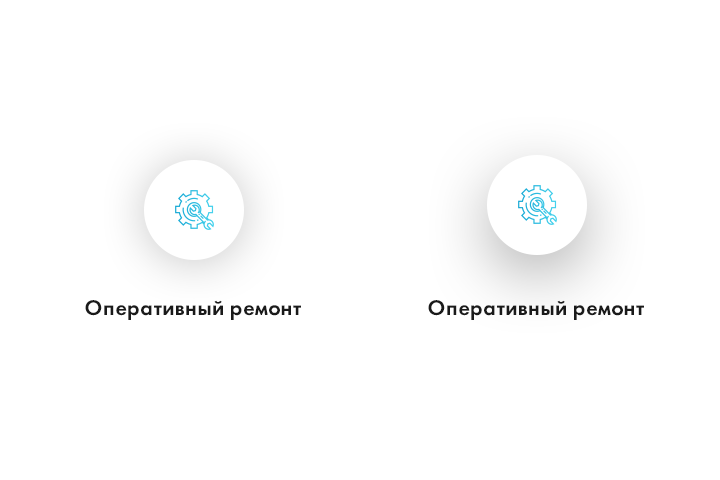
<style>
.page{position:relative;width:720px;height:480px;background:#ffffff}
.page>*{position:absolute;margin:0}
.t1{font:22px "FuturaPTDemi";letter-spacing:0.02em;color:#1a1a1a}
</style>
<div class="page">
<p class="t1" style="left:85px;top:300px;width:216px;height:20px">Оперативный ремонт</p>
<p class="t1" style="left:428px;top:300px;width:216px;height:20px">Оперативный ремонт</p>
</div>
